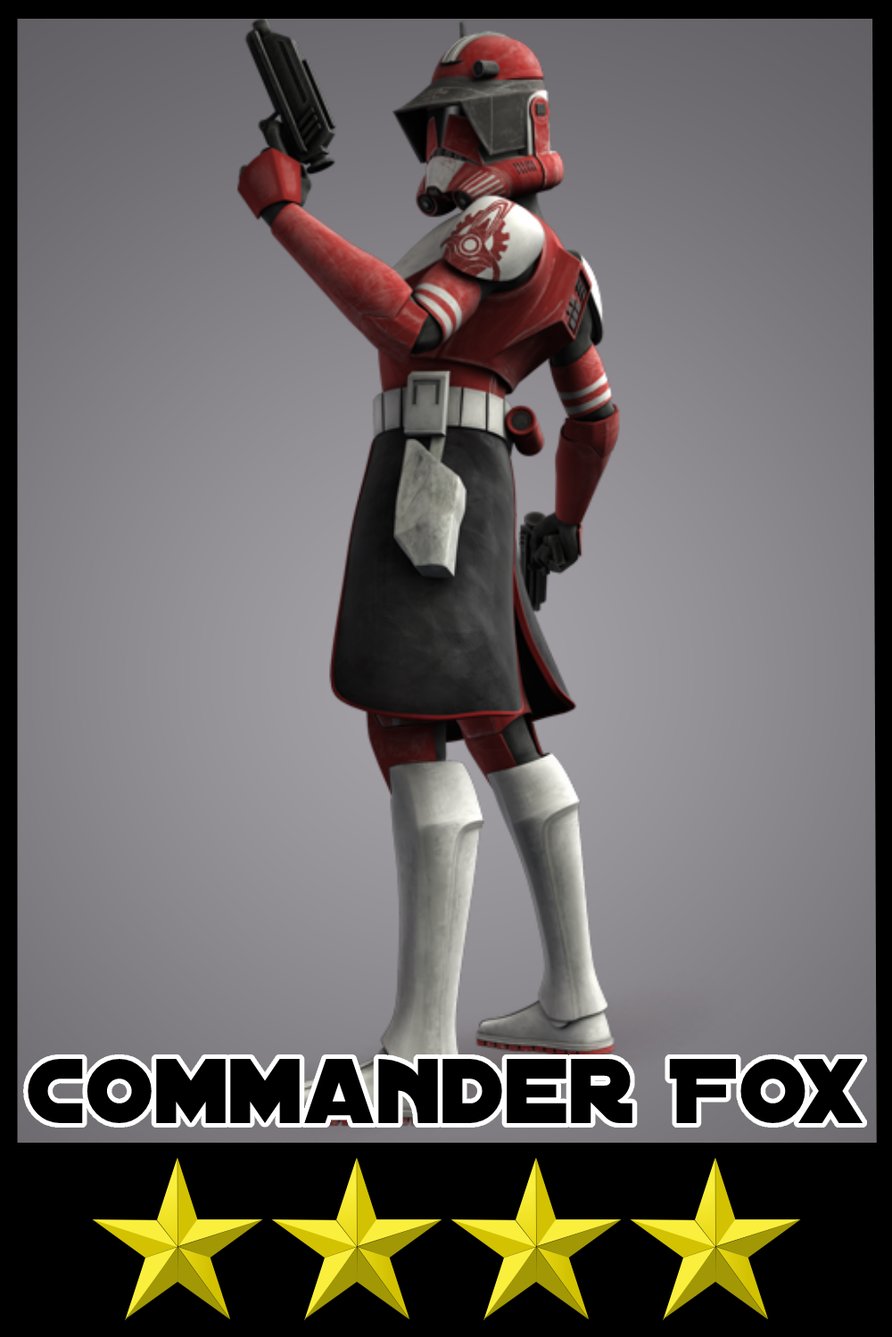
<style>
.page{position:relative;width:892px;height:1337px}
.page>*{position:absolute;margin:0}
.t1{font:98.7px "DistantGalaxy";color:#000000}
</style>
<div class="page">
<p class="t1" style="left:28px;top:1059px;width:834px;height:64px">Commander Fox</p>
</div>
